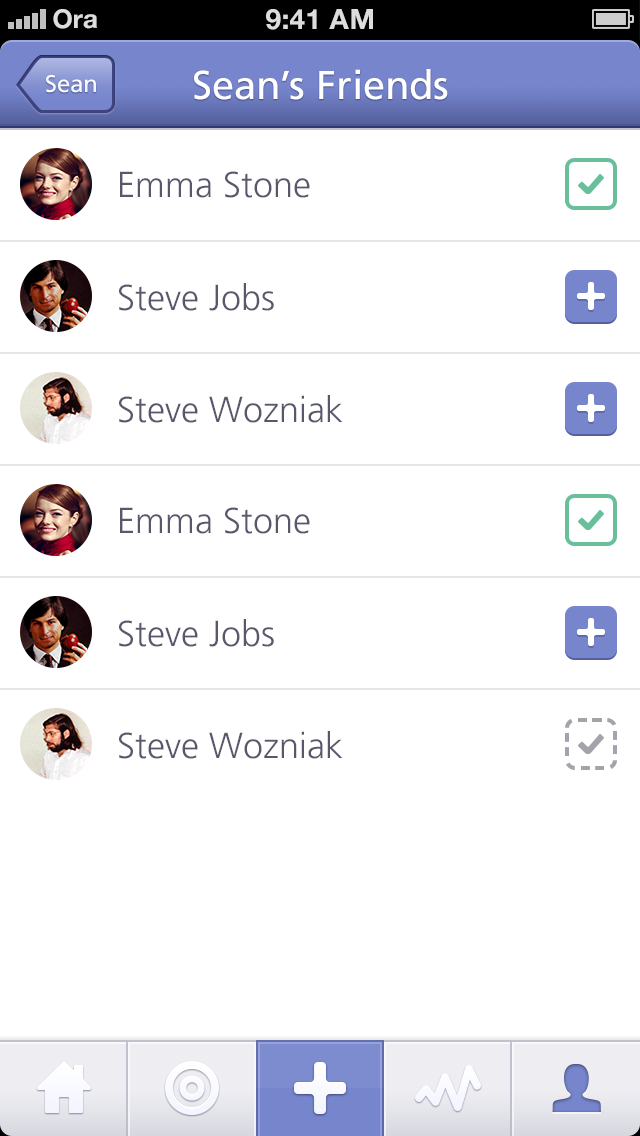
<style>
.page{position:relative;width:640px;height:1136px;background:#ffffff}
.page>*{position:absolute;margin:0}
.t1{font:24px "FrutigerLT-Roman";color:#f2f5ff}
.t2{font:40px "FrutigerLT-Roman";color:#ffffff}
.t3{font:36px "FrutigerLT-Light";color:#58586d}
</style>
<div class="page">
<p class="t1" style="left:46px;top:75px;width:50px;height:18px">Sean</p>
<p class="t2" style="left:194px;top:69px;width:254px;height:31px">Sean’s Friends</p>
<p class="t3" style="left:120px;top:171px;width:190px;height:27px">Emma Stone</p>
<p class="t3" style="left:119px;top:283px;width:155px;height:28px">Steve Jobs</p>
<p class="t3" style="left:119px;top:395px;width:224px;height:28px">Steve Wozniak</p>
<p class="t3" style="left:120px;top:507px;width:190px;height:27px">Emma Stone</p>
<p class="t3" style="left:119px;top:619px;width:155px;height:28px">Steve Jobs</p>
<p class="t3" style="left:119px;top:731px;width:224px;height:28px">Steve Wozniak</p>
</div>
